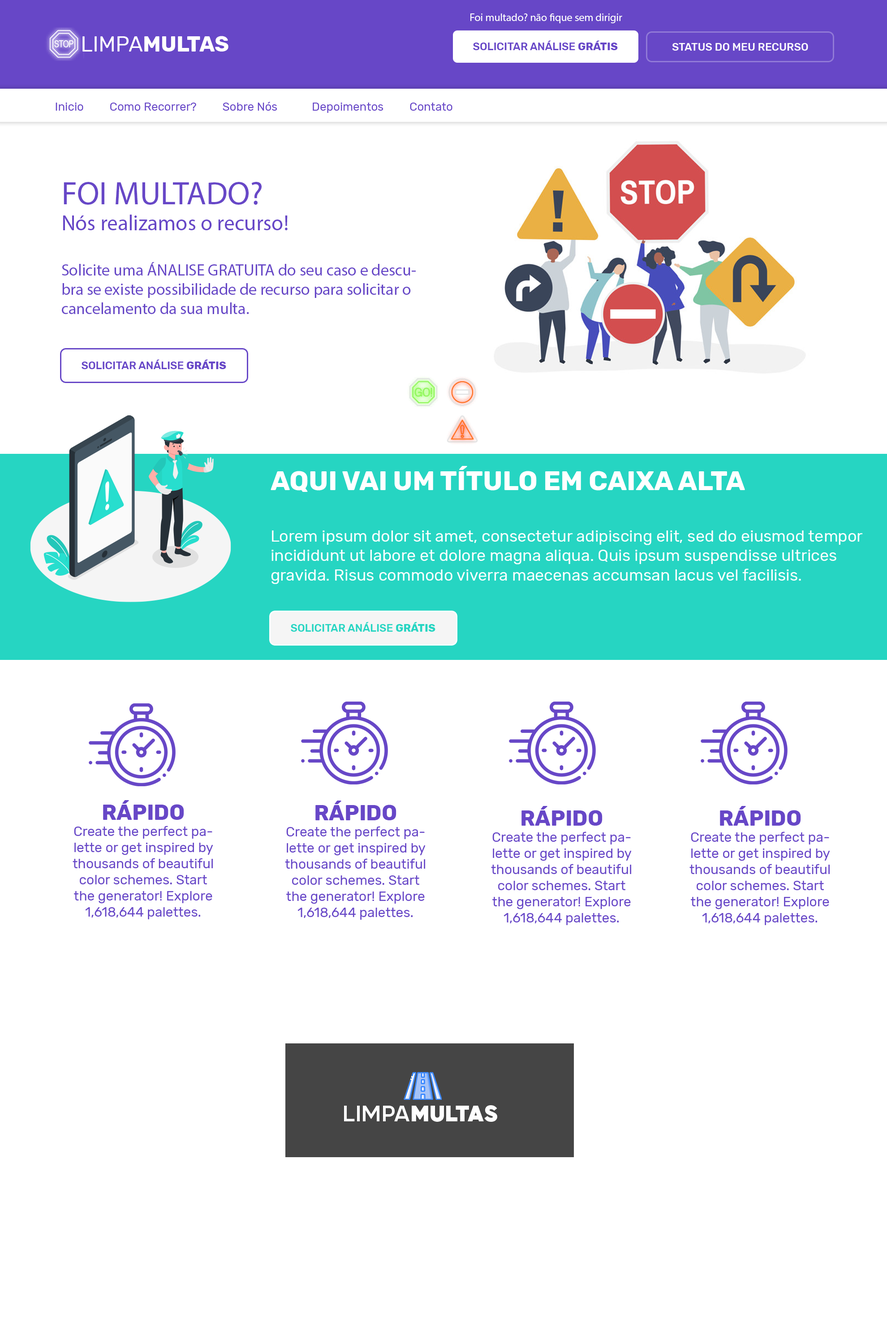
<style>
.page{position:relative;width:887px;height:1344px;background:#ffffff}
.page>*{position:absolute;margin:0}
.t1{font:10.8px "MyriadPro-Regular";color:#ffffff}
.t2{font:21.5px "Rubik-Bold";color:#ffffff}
.t3{font:21.5px "Rubik-Regular";color:#ffffff}
.t4{font:10.8px "Rubik-Medium";color:#6747c7}
.t5{font:10.8px "Rubik-Bold";color:#6747c7}
.t6{font:10.8px "Rubik-Medium";color:#ffffff}
.t7{font:11.6px "Rubik-Regular";color:#6747c7}
.t8{font:16.1px "MyriadPro-Regular";color:#6747c7}
.t9{font:32.3px "MyriadPro-Regular";color:#6747c7}
.t10{font:21.5px "MyriadPro-Regular";color:#6747c7}
.t11{font:16.1px "Rubik-Regular";color:#ffffff}
.t12{font:26.9px "Rubik-Bold";color:#ffffff}
.t13{font:10.8px "Rubik-Medium";color:#26d5c2}
.t14{font:10.8px "Rubik-Bold";color:#26d5c2}
.t15{font:13.4px "Rubik-Regular";color:#6747c7}
.t16{font:21.5px "Rubik-Bold";color:#6747c7}
.t17{font:26.9px "Grold-Black";color:#ffffff}
.t18{font:26.9px "Grold-Regular";color:#ffffff}
</style>
<div class="page">
<p class="t1" style="left:470px;top:13px;width:152px;height:10px">Foi multado? não fique sem dirigir</p>
<p class="t2" style="left:82px;top:36px;width:147px;height:16px"><span class="t3">LIMPA</span>MULTAS</p>
<p class="t4" style="left:473px;top:40px;width:145px;height:10px">SOLICITAR ANÁLISE <span class="t5">GRÁTIS</span></p>
<p class="t6" style="left:672px;top:43px;width:136px;height:8px">STATUS DO MEU RECURSO</p>
<p class="t7" style="left:56px;top:102px;width:397px;height:11px">Inicio         Como Recorrer?         Sobre Nós            Depoimentos         Contato</p>
<p class="t8" style="left:62px;top:182px;width:354px;height:132px"><span class="t9">FOI MULTADO?<br></span><span class="t10">Nós realizamos o recurso!<br><br></span>Solicite uma ÁNALISE GRATUITA do seu caso e descubra se existe possibilidade de recurso para solicitar o cancelamento da sua multa.</p>
<p class="t4" style="left:82px;top:359px;width:144px;height:10px">SOLICITAR ANÁLISE <span class="t5">GRÁTIS</span></p>
<p class="t11" style="left:271px;top:466px;width:592px;height:118px"><span class="t12">AQUI VAI UM TÍTULO EM CAIXA ALTA<br><br></span>Lorem ipsum dolor sit amet, consectetur adipiscing elit, sed do eiusmod tempor incididunt ut labore et dolore magna aliqua. Quis ipsum suspendisse ultrices gravida. Risus commodo viverra maecenas accumsan lacus vel facilisis.</p>
<p class="t13" style="left:291px;top:622px;width:145px;height:10px">SOLICITAR ANÁLISE <span class="t14">GRÁTIS</span></p>
<p class="t15" style="left:73px;top:800px;width:140px;height:119px;text-align:center"><span class="t16">RÁPIDO<br></span>Create the perfect palette or get inspired by thousands of beautiful color schemes. Start the generator! Explore 1,618,644 palettes.</p>
<p class="t15" style="left:285px;top:801px;width:141px;height:119px;text-align:center"><span class="t16">RÁPIDO<br></span>Create the perfect palette or get inspired by thousands of beautiful color schemes. Start the generator! Explore 1,618,644 palettes.</p>
<p class="t15" style="left:491px;top:806px;width:141px;height:119px;text-align:center"><span class="t16">RÁPIDO<br></span>Create the perfect palette or get inspired by thousands of beautiful color schemes. Start the generator! Explore 1,618,644 palettes.</p>
<p class="t15" style="left:690px;top:806px;width:140px;height:119px;text-align:center"><span class="t16">RÁPIDO<br></span>Create the perfect palette or get inspired by thousands of beautiful color schemes. Start the generator! Explore 1,618,644 palettes.</p>
<p class="t17" style="left:344px;top:1105px;width:153px;height:17px"><span class="t18">LIMPA</span>MULTAS</p>
</div>
